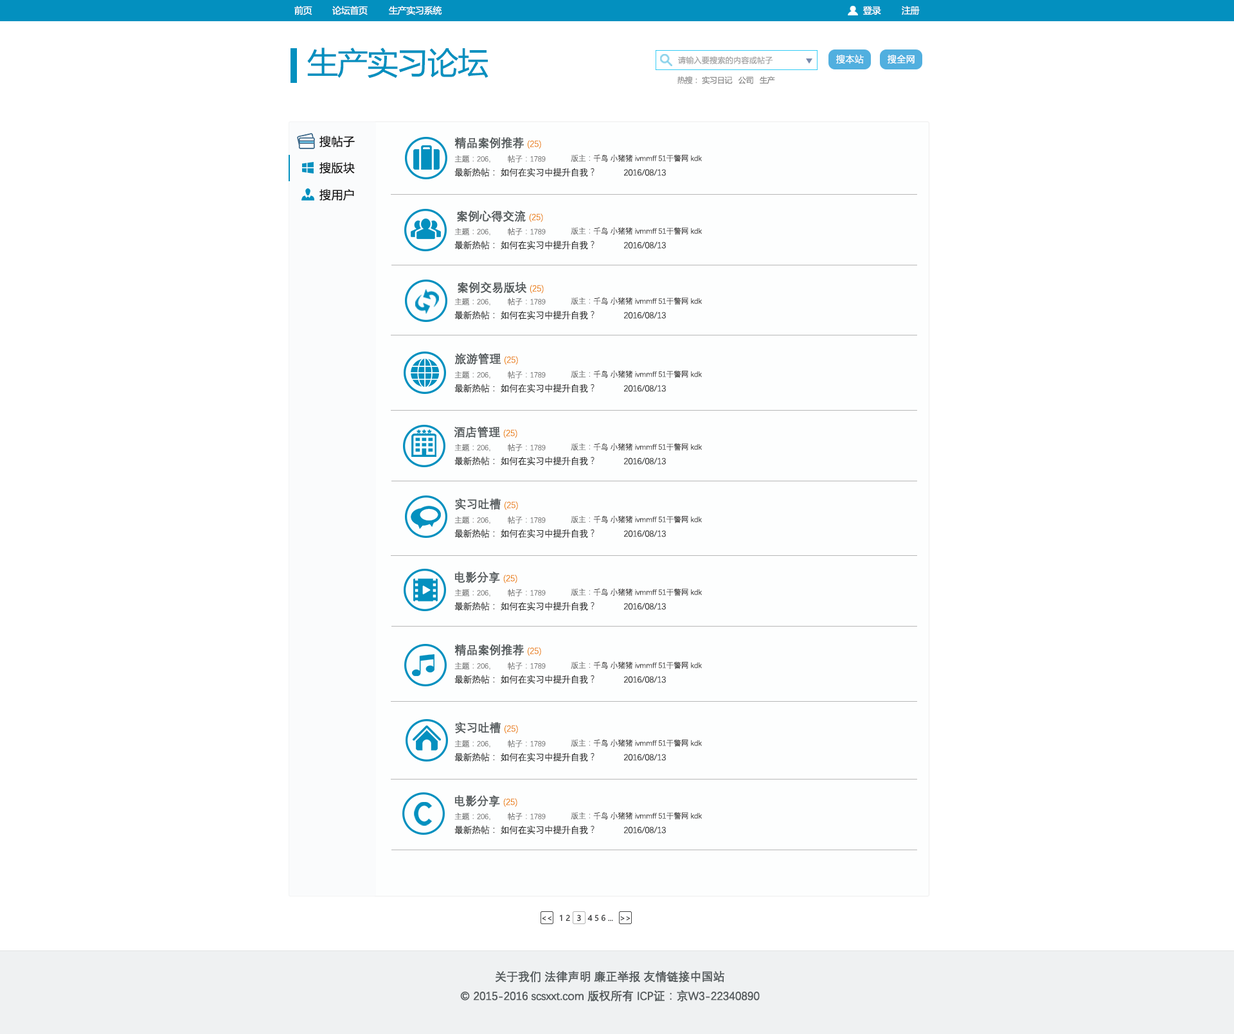
<style>
.page{position:relative;width:1234px;height:1034px;background:#ffffff}
.page>*{position:absolute;margin:0}
.t1{font:9px "MicrosoftYaHei";letter-spacing:-0.025em;color:#ffffff}
.t2{font:30.9px "MicrosoftYaHei";letter-spacing:-0.025em;color:#0390bf}
.t3{font:7.7px "MicrosoftYaHei";letter-spacing:0.025em;color:#a3a3a3}
.t4{font:9px "MicrosoftYaHei";letter-spacing:0.025em;color:#ffffff}
.t5{font:7.7px "MicrosoftYaHei";letter-spacing:-0.025em;color:#8a8a8a}
.t6{font:7.7px "MicrosoftYaHei";letter-spacing:-0.025em;color:#969696}
.t7{font:11.6px "MicrosoftYaHei";letter-spacing:0.025em;color:#141313}
.t8{font:11.6px "DengXian-Regular";letter-spacing:-0.025em;color:#545a5c;font-weight:bold}
.t9{font:9px "DengXian-Regular";letter-spacing:-0.025em;color:#ea7f00}
.t10{font:7.7px "DengXian-Regular";letter-spacing:-0.025em;color:#747474}
.t11{font:7.7px "DengXian-Regular";letter-spacing:-0.025em;color:#373535}
.t12{font:9px "DengXian-Regular";letter-spacing:-0.025em;color:#272727}
.t13{font:7.7px "MicrosoftYaHei";letter-spacing:-0.01em;color:#38393a}
.t14{font:7.7px "MicrosoftYaHei";letter-spacing:-0.01em;color:#252626}
.t15{font:11.6px/19.3px "DengXian-Regular";letter-spacing:-0.025em;color:#545a5c;font-weight:bold}
</style>
<div class="page">
<p class="t1" style="left:294px;top:6px;width:18px;height:9px">前页</p>
<p class="t1" style="left:332px;top:6px;width:36px;height:9px">论坛首页</p>
<p class="t1" style="left:389px;top:6px;width:53px;height:9px">生产实习系统</p>
<p class="t1" style="left:863px;top:6px;width:18px;height:9px">登录</p>
<p class="t1" style="left:902px;top:6px;width:18px;height:9px">注册</p>
<p class="t2" style="left:307px;top:48px;width:182px;height:30px">生产实习论坛</p>
<p class="t3" style="left:678px;top:56px;width:95px;height:8px">请输入要搜索的内容或帖子</p>
<p class="t4" style="left:836px;top:55px;width:28px;height:9px">搜本站</p>
<p class="t4" style="left:888px;top:55px;width:27px;height:9px">搜全网</p>
<p class="t5" style="left:678px;top:76px;width:97px;height:8px"><span class="t6">热搜：</span> 实习日记   公司   生产</p>
<p class="t7" style="left:320px;top:136px;width:35px;height:11px">搜帖子</p>
<p class="t8" style="left:455px;top:137px;width:86px;height:12px">精品案例推荐 <span class="t9">(25)</span></p>
<p class="t10" style="left:455px;top:155px;width:91px;height:8px">主题：206，      帖子：1789</p>
<p class="t11" style="left:571px;top:154px;width:131px;height:8px"><span class="t10">版主：</span>千鸟 小猪猪 ivmmff 51干警网 kdk</p>
<p class="t7" style="left:320px;top:162px;width:35px;height:12px">搜版块</p>
<p class="t12" style="left:455px;top:168px;width:211px;height:9px">最新热帖： 如何在实习中提升自我？            2016/08/13</p>
<p class="t7" style="left:320px;top:189px;width:34px;height:12px">搜用户</p>
<p class="t8" style="left:457px;top:210px;width:86px;height:12px">案例心得交流 <span class="t9">(25)</span></p>
<p class="t10" style="left:455px;top:228px;width:91px;height:8px">主题：206，      帖子：1789</p>
<p class="t11" style="left:571px;top:227px;width:131px;height:8px"><span class="t10">版主：</span>千鸟 小猪猪 ivmmff 51干警网 kdk</p>
<p class="t12" style="left:455px;top:240px;width:211px;height:10px">最新热帖： 如何在实习中提升自我？            2016/08/13</p>
<p class="t8" style="left:458px;top:282px;width:86px;height:12px">案例交易版块 <span class="t9">(25)</span></p>
<p class="t10" style="left:455px;top:298px;width:91px;height:8px">主题：206，      帖子：1789</p>
<p class="t11" style="left:571px;top:297px;width:131px;height:8px"><span class="t10">版主：</span>千鸟 小猪猪 ivmmff 51干警网 kdk</p>
<p class="t12" style="left:455px;top:311px;width:211px;height:9px">最新热帖： 如何在实习中提升自我？            2016/08/13</p>
<p class="t8" style="left:455px;top:353px;width:63px;height:12px">旅游管理 <span class="t9">(25)</span></p>
<p class="t10" style="left:455px;top:371px;width:91px;height:8px">主题：206，      帖子：1789</p>
<p class="t11" style="left:571px;top:370px;width:131px;height:8px"><span class="t10">版主：</span>千鸟 小猪猪 ivmmff 51干警网 kdk</p>
<p class="t12" style="left:455px;top:384px;width:211px;height:9px">最新热帖： 如何在实习中提升自我？            2016/08/13</p>
<p class="t8" style="left:454px;top:426px;width:64px;height:12px">酒店管理 <span class="t9">(25)</span></p>
<p class="t10" style="left:455px;top:444px;width:91px;height:8px">主题：206，      帖子：1789</p>
<p class="t11" style="left:571px;top:443px;width:131px;height:8px"><span class="t10">版主：</span>千鸟 小猪猪 ivmmff 51干警网 kdk</p>
<p class="t12" style="left:455px;top:456px;width:211px;height:10px">最新热帖： 如何在实习中提升自我？            2016/08/13</p>
<p class="t8" style="left:455px;top:498px;width:63px;height:12px">实习吐槽 <span class="t9">(25)</span></p>
<p class="t10" style="left:455px;top:516px;width:91px;height:8px">主题：206，      帖子：1789</p>
<p class="t11" style="left:571px;top:516px;width:131px;height:7px"><span class="t10">版主：</span>千鸟 小猪猪 ivmmff 51干警网 kdk</p>
<p class="t12" style="left:455px;top:529px;width:211px;height:9px">最新热帖： 如何在实习中提升自我？            2016/08/13</p>
<p class="t8" style="left:455px;top:572px;width:63px;height:12px">电影分享 <span class="t9">(25)</span></p>
<p class="t10" style="left:455px;top:589px;width:91px;height:8px">主题：206，      帖子：1789</p>
<p class="t11" style="left:571px;top:588px;width:131px;height:9px"><span class="t10">版主：</span>千鸟 小猪猪 ivmmff 51干警网 kdk</p>
<p class="t12" style="left:455px;top:602px;width:211px;height:9px">最新热帖： 如何在实习中提升自我？            2016/08/13</p>
<p class="t8" style="left:455px;top:644px;width:86px;height:12px">精品案例推荐 <span class="t9">(25)</span></p>
<p class="t10" style="left:455px;top:662px;width:91px;height:8px">主题：206，      帖子：1789</p>
<p class="t11" style="left:571px;top:662px;width:131px;height:7px"><span class="t10">版主：</span>千鸟 小猪猪 ivmmff 51干警网 kdk</p>
<p class="t12" style="left:455px;top:675px;width:211px;height:9px">最新热帖： 如何在实习中提升自我？            2016/08/13</p>
<p class="t8" style="left:455px;top:722px;width:63px;height:12px">实习吐槽 <span class="t9">(25)</span></p>
<p class="t10" style="left:455px;top:740px;width:91px;height:8px">主题：206，      帖子：1789</p>
<p class="t11" style="left:571px;top:739px;width:131px;height:8px"><span class="t10">版主：</span>千鸟 小猪猪 ivmmff 51干警网 kdk</p>
<p class="t12" style="left:455px;top:753px;width:211px;height:9px">最新热帖： 如何在实习中提升自我？            2016/08/13</p>
<p class="t8" style="left:455px;top:795px;width:63px;height:12px">电影分享 <span class="t9">(25)</span></p>
<p class="t10" style="left:455px;top:813px;width:91px;height:8px">主题：206，      帖子：1789</p>
<p class="t11" style="left:571px;top:812px;width:131px;height:8px"><span class="t10">版主：</span>千鸟 小猪猪 ivmmff 51干警网 kdk</p>
<p class="t12" style="left:455px;top:825px;width:211px;height:10px">最新热帖： 如何在实习中提升自我？            2016/08/13</p>
<p class="t13" style="left:542px;top:915px;width:89px;height:7px">&lt;&lt;   1 2 <span class="t14">  3 </span>  4 5 6 ...   &gt;&gt;</p>
<p class="t15" style="left:460px;top:971px;width:300px;height:31px;text-align:center">关于我们 法律声明 廉正举报 友情链接中国站<br>© 2015-2016 scsxxt.com 版权所有 ICP证：京W3-22340890</p>
</div>
